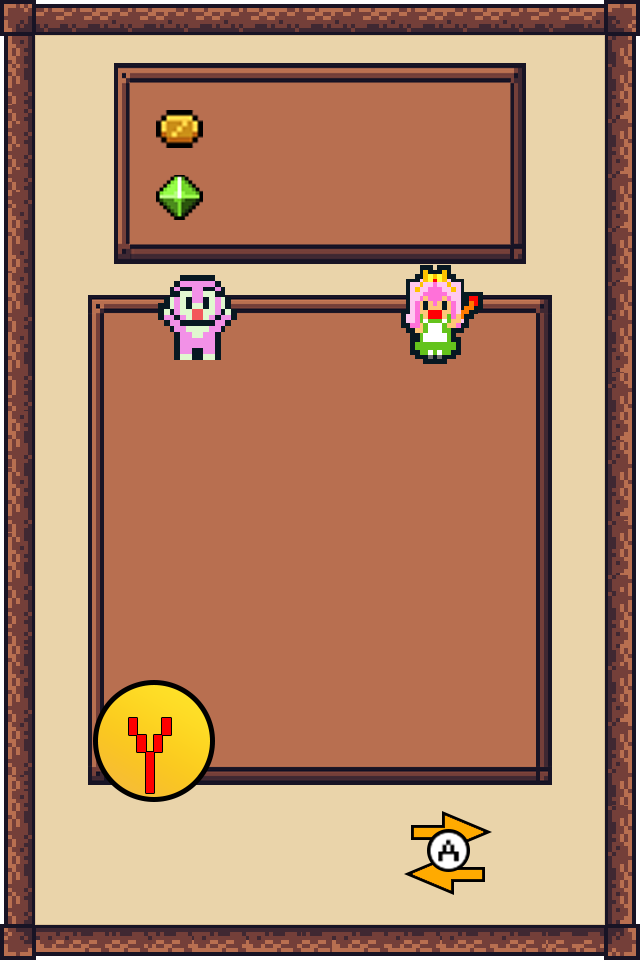
<style>
.page{position:relative;width:640px;height:960px;background:#b86f50}
.page>*{position:absolute;margin:0}
.t1{font:100px "PixelMplus12-Regular";color:#ff0000}
</style>
<div class="page">
<p class="t1" style="left:129px;top:718px;width:42px;height:75px">Y</p>
</div>
